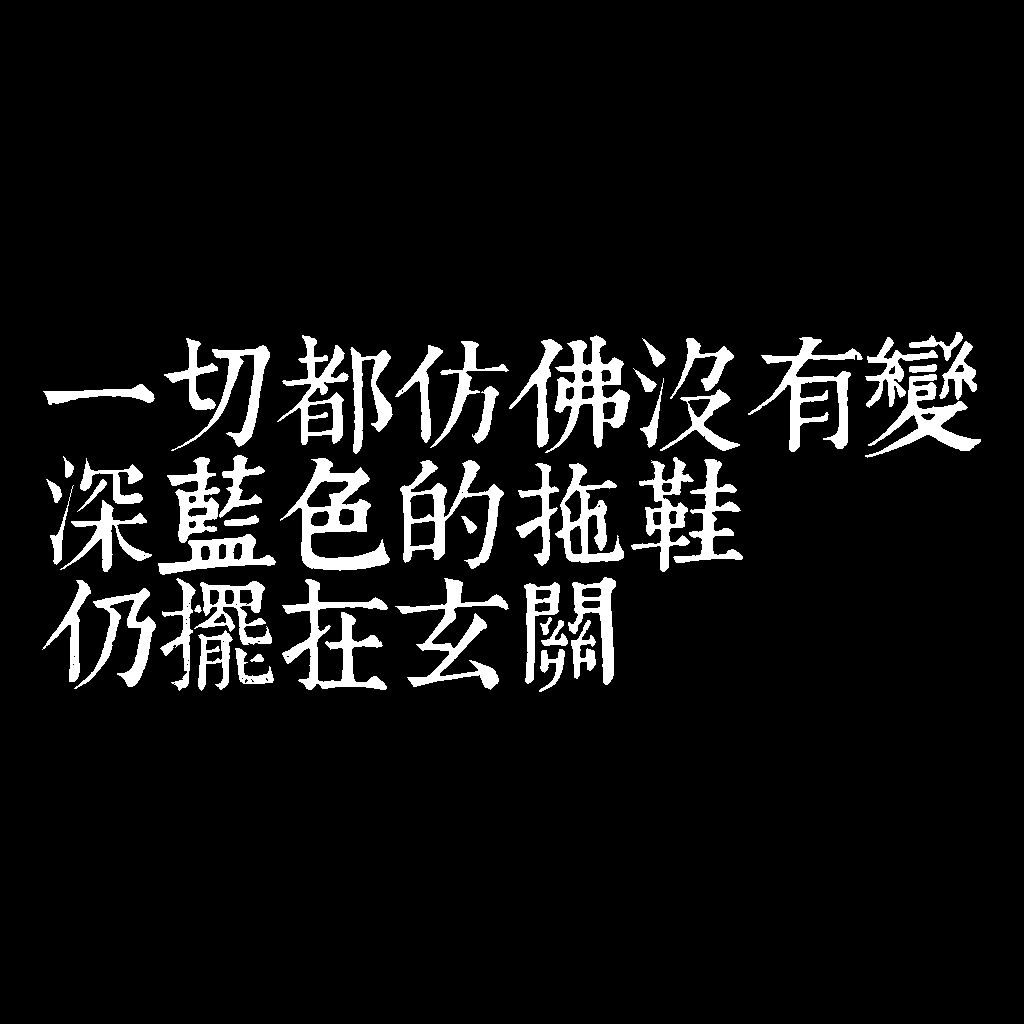
<style>
.page{position:relative;width:1024px;height:1024px;background:#000000}
.page>*{position:absolute;margin:0}
.t1{font:120px/120px "TpldKhangXiDictTrial";letter-spacing:-0.02em;color:#ffffff}
</style>
<div class="page">
<p class="t1" style="left:42px;top:332px;width:939px;height:360px">一切都仿佛沒有變<br>深藍色的拖鞋<br>仍擺在玄關</p>
</div>
